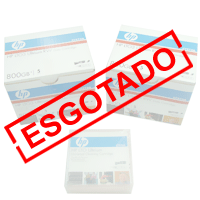
<style>
.page{position:relative;width:200px;height:200px;background:#ffffff}
.page>*{position:absolute;margin:0}
.t1{font:30.6px "Arial-BoldMT";letter-spacing:0.005em;color:#ff0000}
</style>
<div class="page">
<p class="t1" style="left:20px;top:48px;width:156px;height:101px;rotate:-30deg">ESGOTADO</p>
</div>
